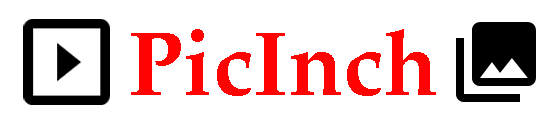
<style>
.page{position:relative;width:558px;height:124px;background:#ffffff}
.page>*{position:absolute;margin:0}
.t1{font:90px "Palatino-Bold";color:#ff0202}
</style>
<div class="page">
<p class="t1" style="left:131px;top:29px;width:305px;height:67px">PicInch</p>
</div>
